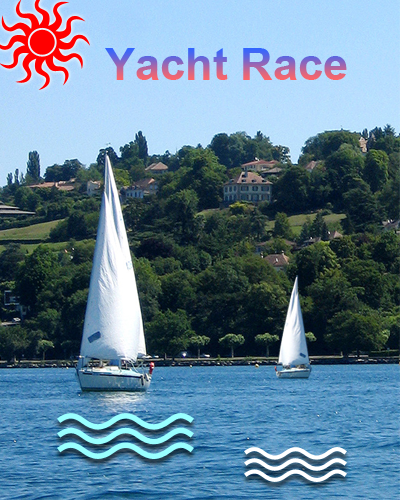
<style>
.page{position:relative;width:400px;height:500px}
.page>*{position:absolute;margin:0}
.t1{font:45px "Arial-BoldMT"}
</style>
<div class="page">
<p class="t1" style="left:105px;top:48px;width:242px;height:32px">Yacht Race</p>
</div>
